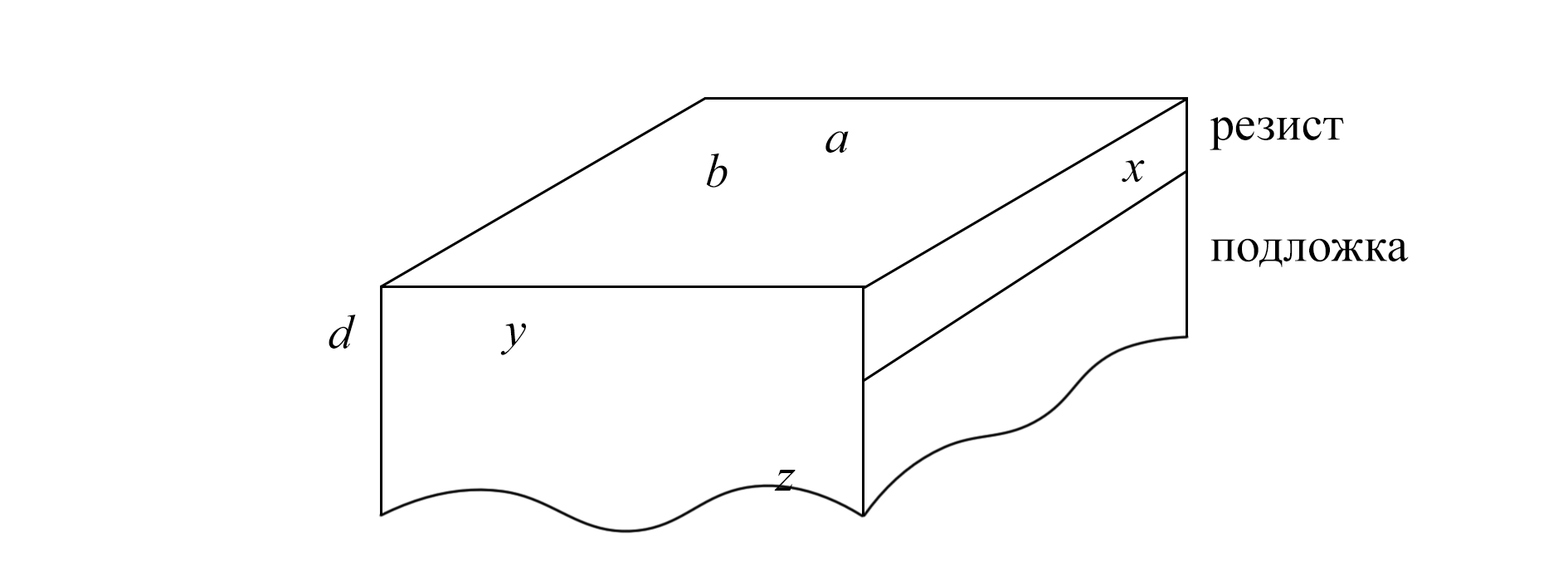
<style>
.page{position:relative;width:1568px;height:576px;background:#ffffff}
.page>*{position:absolute;margin:0}
.t1{font:48.4px "TimesNewRomanPSMT";color:#000000}
.t2{font:48.4px "TimesNewRomanPS-ItalicMT";color:#000000}
</style>
<div class="page">
<p class="t1" style="left:1210px;top:117px;width:134px;height:33px">резист</p>
<p class="t2" style="left:825px;top:131px;width:24px;height:22px">a</p>
<p class="t2" style="left:706px;top:153px;width:22px;height:34px">b</p>
<p class="t2" style="left:1122px;top:160px;width:23px;height:23px">x</p>
<p class="t1" style="left:1210px;top:238px;width:199px;height:29px">подложка</p>
<p class="t2" style="left:329px;top:314px;width:27px;height:34px">d</p>
<p class="t2" style="left:500px;top:323px;width:26px;height:32px">y</p>
<p class="t2" style="left:774px;top:470px;width:22px;height:21px">z</p>
</div>
